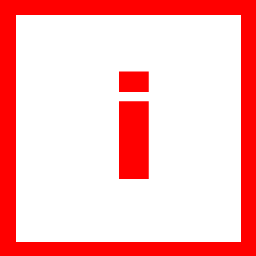
<style>
.page{position:relative;width:256px;height:256px;background:#ffffff}
.page>*{position:absolute;margin:0}
.t1{font:150px "Arial-Black";color:#ff0000}
</style>
<div class="page">
<p class="t1" style="left:119px;top:71px;width:30px;height:108px">i</p>
</div>
